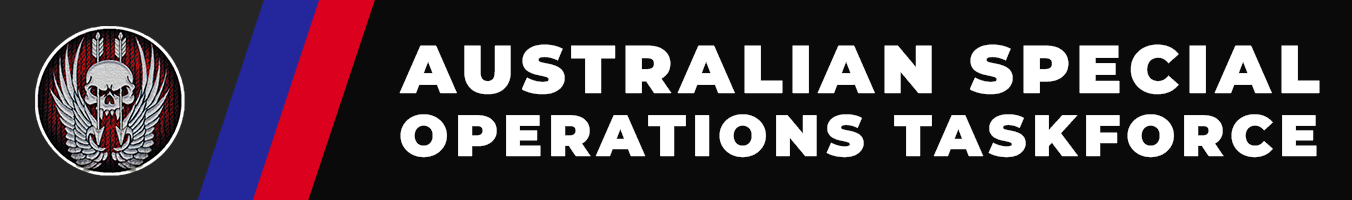
<style>
.page{position:relative;width:1352px;height:200px;background:#0a0a0a}
.page>*{position:absolute;margin:0}
.t1{font:67.4px "MontserratRoman-Black";letter-spacing:0.1em;color:#ffffff}
.t2{font:58.1px "MontserratRoman-Black";letter-spacing:0.1em;color:#ffffff}
</style>
<div class="page">
<p class="t1" style="left:399px;top:44px;width:921px;height:51px">AUSTRALIAN SPECIAL</p>
<p class="t2" style="left:400px;top:114px;width:917px;height:44px">OPERATIONS TASKFORCE</p>
</div>
